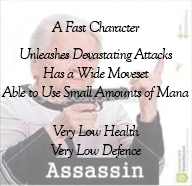
<style>
.page{position:relative;width:192px;height:186px;background:#ffffff}
.page>*{position:absolute;margin:0}
.t1{font:16px "GoudyOldStyleT-Italic";letter-spacing:-0.05em;color:#010101}
</style>
<div class="page">
<p class="t1" style="left:1px;top:21px;width:188px;height:137px;text-align:center">A Fast Character<br><br>Unleashes Devastating Attacks<br>Has a Wide Moveset<br>Able to Use Small Amounts of Mana<br><br>Very Low Health<br>Very Low Defence</p>
</div>
